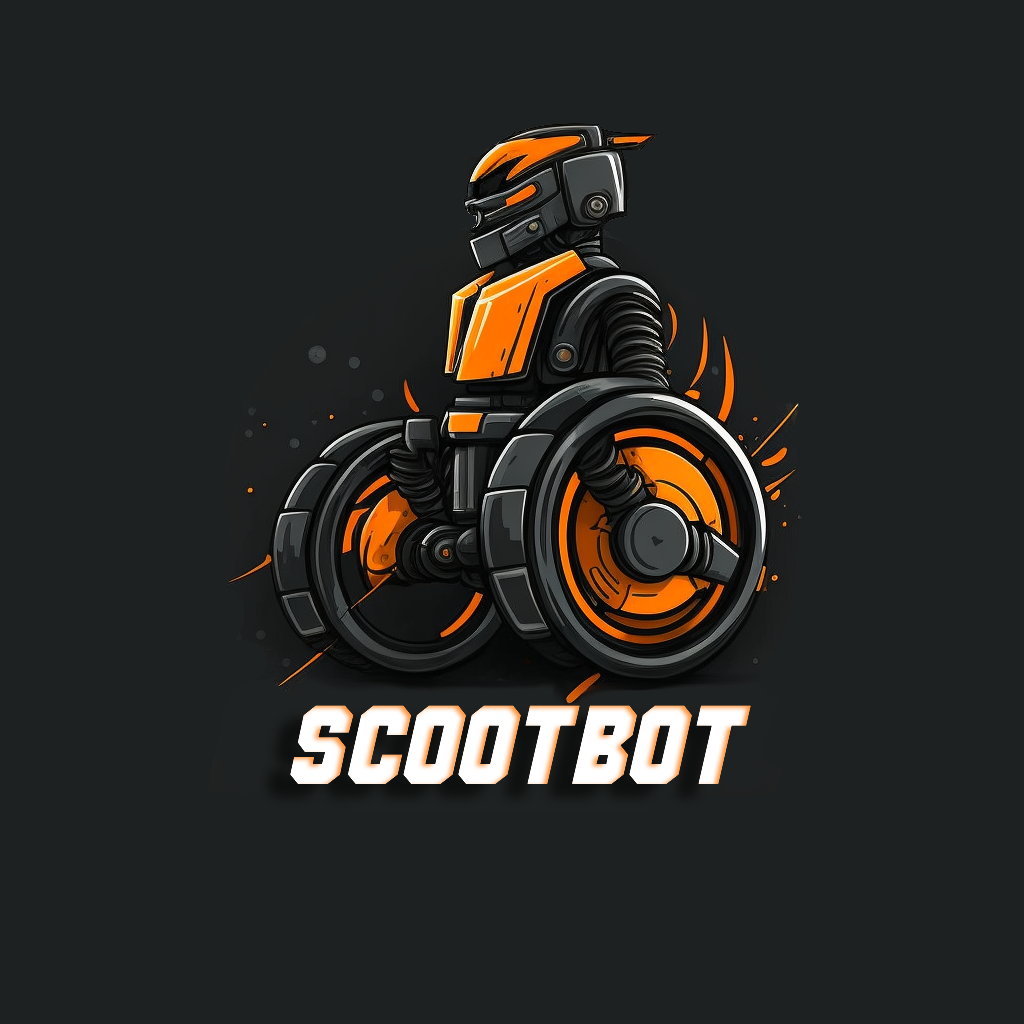
<style>
.page{position:relative;width:1024px;height:1024px;background:#1e2121}
.page>*{position:absolute;margin:0}
.t1{font:111.5px "Commando";color:#ffffff}
</style>
<div class="page">
<p class="t1" style="left:290px;top:705px;width:461px;height:79px">Scootbot</p>
</div>
